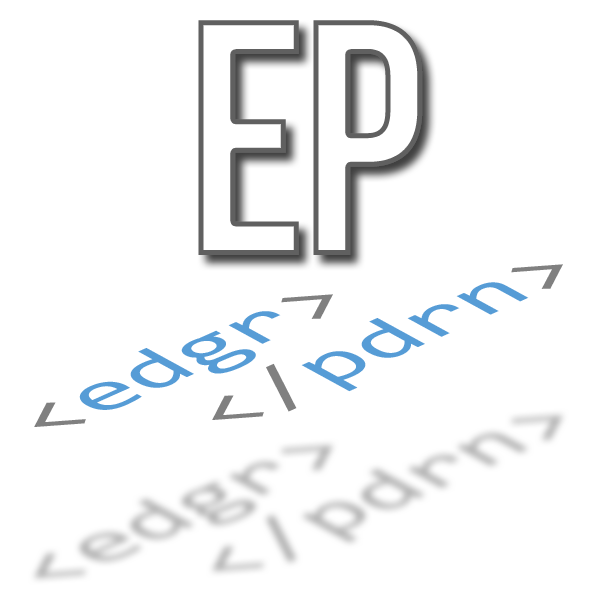
<style>
.page{position:relative;width:600px;height:600px;background:#ffffff}
.page>*{position:absolute;margin:0}
.t1{font:78.6px "Consolas";letter-spacing:-0.01em;color:#569cd6;scale:1.34 1}
.t2{font:78.6px "Consolas";letter-spacing:-0.01em;color:#808080;scale:1.34 1}
</style>
<div class="page">
<p class="t1" style="left:212px;top:264px;width:351px;height:156px;rotate:-24deg"><span class="t2">&lt;/</span>pdrn<span class="t2">&gt;</span></p>
<p class="t1" style="left:34px;top:294px;width:299px;height:133px;rotate:-24deg"><span class="t2">&lt;</span>edgr<span class="t2">&gt;</span></p>
</div>
